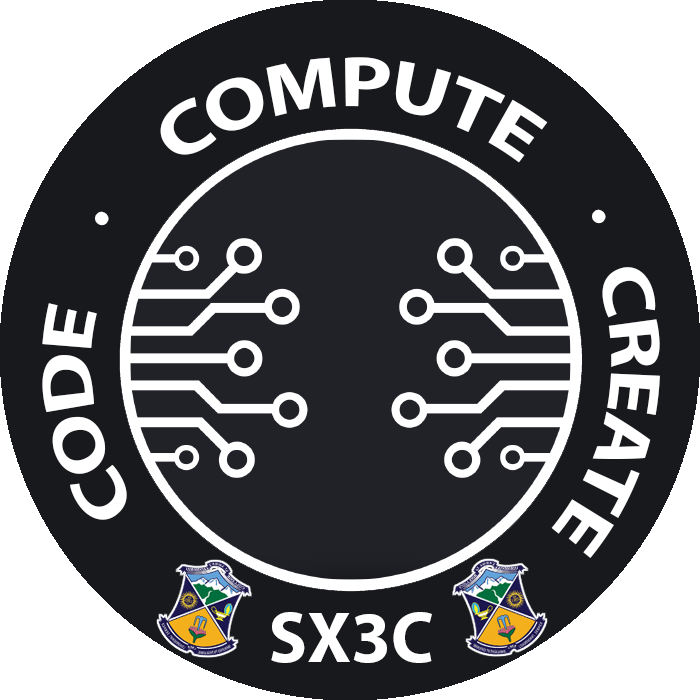
<style>
.page{position:relative;width:700px;height:700px;background:#17191d}
.page>*{position:absolute;margin:0}
.t1{font:72px "MyriadPro-Bold";color:#ffffff}
</style>
<div class="page">
<p class="t1" style="left:160px;top:57px;width:388px;height:106px">COMPUTE</p>
<p class="t1" style="left:592px;top:209px;width:14px;height:15px;rotate:-51deg">.</p>
<p class="t1" style="left:95px;top:211px;width:14px;height:15px;rotate:-51deg">.</p>
<p class="t1" style="left:551px;top:267px;width:109px;height:291px;rotate:100deg">CREATE</p>
<p class="t1" style="left:42px;top:303px;width:85px;height:217px;rotate:-102deg">CODE</p>
<p class="t1" style="left:271px;top:612px;width:161px;height:51px">SX3C</p>
</div>
